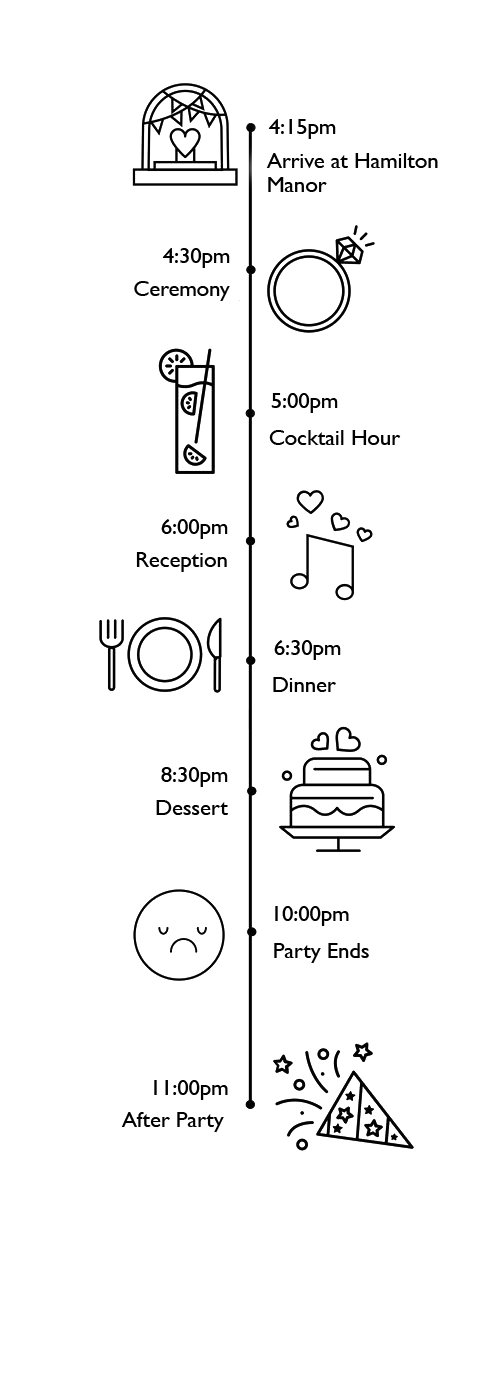
<style>
.page{position:relative;width:500px;height:1386px;background:#ffffff}
.page>*{position:absolute;margin:0}
.t1{font:22.2px "GillSansMT";color:#000000}
.t2{font:22.2px/24.5px "GillSansMT";color:#000000}
</style>
<div class="page">
<p class="t1" style="left:268px;top:119px;width:68px;height:20px">4:15pm</p>
<p class="t2" style="left:266px;top:153px;width:172px;height:39px">Arrive at Hamilton <br>Manor</p>
<p class="t1" style="left:162px;top:248px;width:68px;height:20px">4:30pm</p>
<p class="t1" style="left:134px;top:281px;width:96px;height:20px">Ceremony</p>
<p class="t1" style="left:271px;top:393px;width:67px;height:20px">5:00pm</p>
<p class="t1" style="left:269px;top:430px;width:132px;height:15px">Cocktail Hour</p>
<p class="t1" style="left:161px;top:519px;width:67px;height:20px">6:00pm</p>
<p class="t1" style="left:136px;top:552px;width:91px;height:20px">Reception</p>
<p class="t1" style="left:274px;top:640px;width:67px;height:20px">6:30pm</p>
<p class="t1" style="left:273px;top:677px;width:63px;height:15px">Dinner</p>
<p class="t1" style="left:161px;top:767px;width:67px;height:20px">8:30pm</p>
<p class="t1" style="left:156px;top:800px;width:72px;height:15px">Dessert</p>
<p class="t1" style="left:275px;top:906px;width:74px;height:20px">10:00pm</p>
<p class="t1" style="left:274px;top:943px;width:95px;height:20px">Party Ends</p>
<p class="t1" style="left:154px;top:1080px;width:74px;height:20px">11:00pm</p>
<p class="t1" style="left:121px;top:1112px;width:103px;height:20px">After Party</p>
</div>
